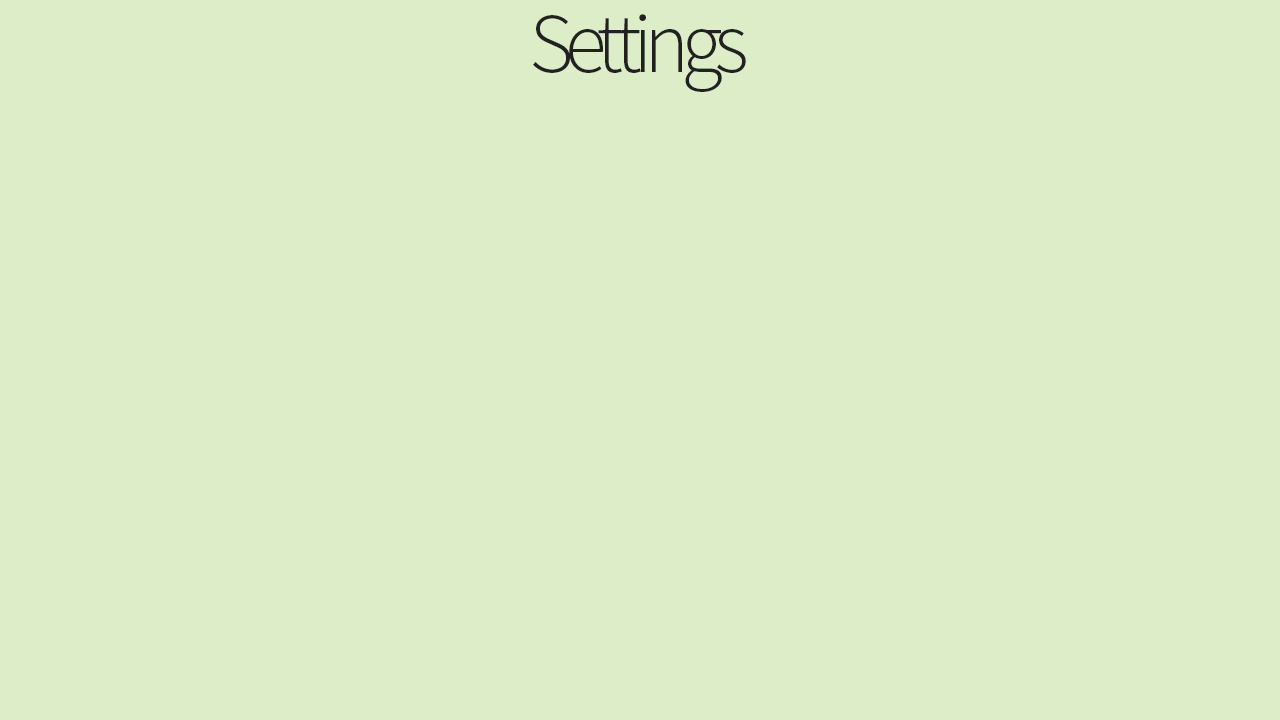
<style>
.page{position:relative;width:1280px;height:720px;background:#dcedc8}
.page>*{position:absolute;margin:0}
.t1{font:85.5px "SourceSansPro-Light";letter-spacing:-0.1em;color:#212121}
</style>
<div class="page">
<p class="t1" style="left:533px;top:14px;width:213px;height:78px">Settings</p>
</div>
